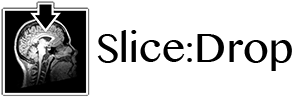
<style>
.page{position:relative;width:306px;height:98px;background:#ffffff}
.page>*{position:absolute;margin:0}
.t1{font:48px "KhmerMN";color:#000000}
</style>
<div class="page">
<p class="t1" style="left:97px;top:30px;width:195px;height:41px">Slice:Drop</p>
</div>
